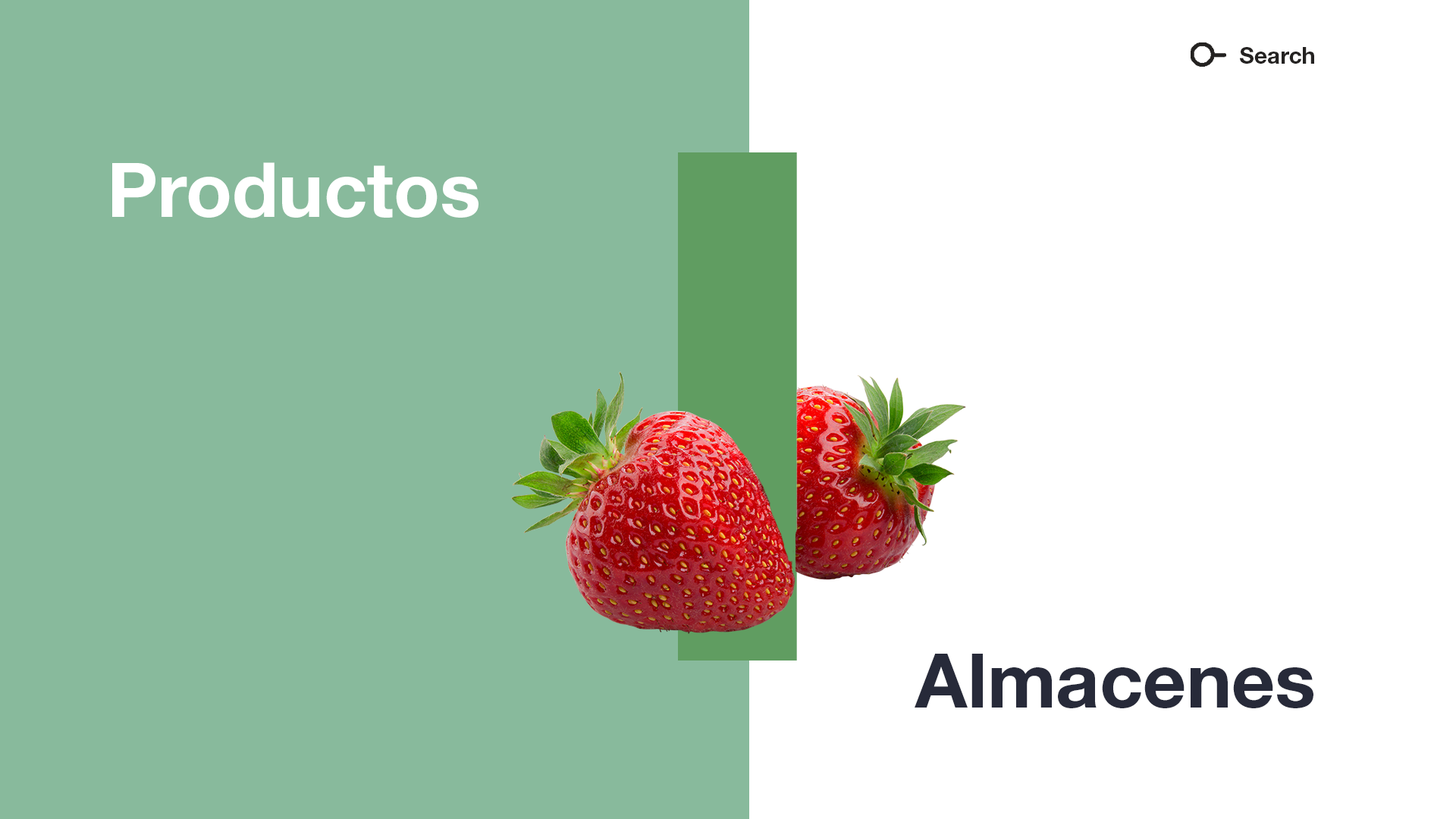
<style>
.page{position:relative;width:1456px;height:819px;background:#88ba9c}
.page>*{position:absolute;margin:0}
.t1{font:22.7px "HelveticaNeue-Bold";color:#242221}
.t2{font:75.8px "HelveticaNeue-Bold";color:#ffffff}
.t3{font:75.8px "HelveticaNeue-Bold";color:#272a39}
</style>
<div class="page">
<p class="t1" style="left:1240px;top:47px;width:74px;height:17px">Search</p>
<p class="t2" style="left:112px;top:162px;width:367px;height:56px">Productos</p>
<p class="t3" style="left:915px;top:654px;width:398px;height:54px">Almacenes</p>
</div>
